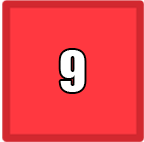
<style>
.page{position:relative;width:144px;height:142px;background:#ff3840}
.page>*{position:absolute;margin:0}
.t1{font:50px "Impact";color:#ffffff}
</style>
<div class="page">
<p class="t1" style="left:60px;top:50px;width:25px;height:42px">9</p>
</div>
